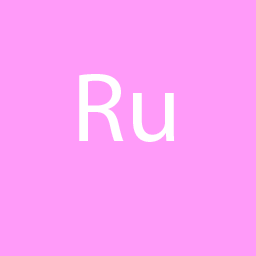
<style>
.page{position:relative;width:256px;height:256px;background:#ff9bf9}
.page>*{position:absolute;margin:0}
.t1{font:100px "MyriadPro-Regular";color:#ffffff}
</style>
<div class="page">
<p class="t1" style="left:79px;top:74px;width:96px;height:68px">Ru</p>
</div>
